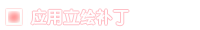
<style>
.page{position:relative;width:200px;height:30px;background:#ffffff}
.page>*{position:absolute;margin:0}
.t1{font:16px "AdobeFanHeitiStd-Bold";color:#fffefe;font-weight:bold}
.t2{font:16px "AdobeHeitiStd-Regular";color:#fffefe;font-weight:bold}
</style>
<div class="page">
<p class="t1" style="left:31px;top:9px;width:98px;height:17px"><span class="t2">应</span>用立<span class="t2">绘</span>补丁</p>
</div>
